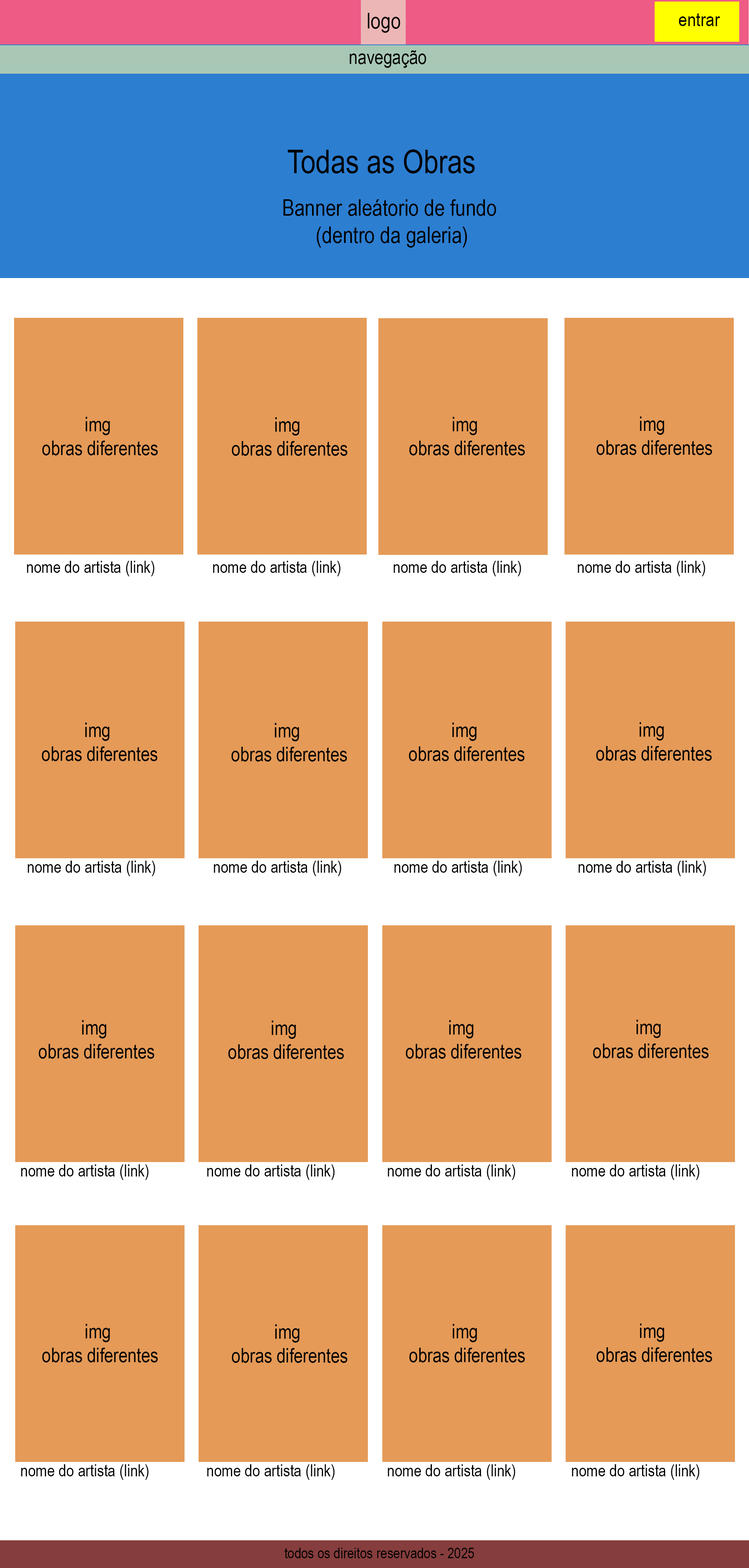
<style>
.page{position:relative;width:749px;height:1568px;background:#e59a57}
.page>*{position:absolute;margin:0}
.t1{font:21.9px "ArialNarrow";color:#000000}
.t2{font:19.3px "ArialNarrow";color:#000000}
.t3{font:19.5px "ArialNarrow";color:#000000}
.t4{font:32.8px "ArialNarrow";color:#000000}
.t5{font:22.7px "ArialNarrow";color:#000000}
.t6{font:19.8px "ArialNarrow";color:#000000}
.t7{font:16.8px "ArialNarrow";color:#000000}
.t8{font:14.8px "ArialNarrow";color:#000000}
</style>
<div class="page">
<p class="t1" style="left:367px;top:13px;width:33px;height:20px">logo</p>
<p class="t2" style="left:679px;top:13px;width:41px;height:13px">entrar</p>
<p class="t3" style="left:349px;top:50px;width:77px;height:18px">navegação</p>
<p class="t4" style="left:287px;top:149px;width:188px;height:25px">Todas as Obras</p>
<p class="t5" style="left:283px;top:199px;width:213px;height:49px;text-align:center">Banner aleátorio de fundo<br> (dentro da galeria)</p>
<p class="t6" style="left:42px;top:417px;width:116px;height:38px;text-align:center">img <br>obras diferentes</p>
<p class="t6" style="left:232px;top:417px;width:115px;height:39px;text-align:center">img <br>obras diferentes</p>
<p class="t6" style="left:409px;top:417px;width:116px;height:38px;text-align:center">img <br>obras diferentes</p>
<p class="t6" style="left:596px;top:416px;width:116px;height:39px;text-align:center">img <br>obras diferentes</p>
<p class="t7" style="left:27px;top:561px;width:127px;height:15px">nome do artista (link)</p>
<p class="t7" style="left:213px;top:561px;width:127px;height:15px">nome do artista (link)</p>
<p class="t7" style="left:393px;top:561px;width:128px;height:15px">nome do artista (link)</p>
<p class="t7" style="left:578px;top:561px;width:127px;height:15px">nome do artista (link)</p>
<p class="t6" style="left:42px;top:723px;width:116px;height:38px;text-align:center">img <br>obras diferentes</p>
<p class="t6" style="left:231px;top:723px;width:116px;height:39px;text-align:center">img <br>obras diferentes</p>
<p class="t6" style="left:409px;top:723px;width:115px;height:38px;text-align:center">img <br>obras diferentes</p>
<p class="t6" style="left:596px;top:722px;width:116px;height:39px;text-align:center">img <br>obras diferentes</p>
<p class="t7" style="left:28px;top:861px;width:127px;height:15px">nome do artista (link)</p>
<p class="t7" style="left:214px;top:861px;width:127px;height:15px">nome do artista (link)</p>
<p class="t7" style="left:394px;top:861px;width:128px;height:15px">nome do artista (link)</p>
<p class="t7" style="left:578px;top:861px;width:128px;height:15px">nome do artista (link)</p>
<p class="t6" style="left:39px;top:1020px;width:115px;height:39px;text-align:center">img <br>obras diferentes</p>
<p class="t6" style="left:228px;top:1021px;width:116px;height:38px;text-align:center">img <br>obras diferentes</p>
<p class="t6" style="left:406px;top:1020px;width:115px;height:39px;text-align:center">img <br>obras diferentes</p>
<p class="t6" style="left:593px;top:1020px;width:116px;height:38px;text-align:center">img <br>obras diferentes</p>
<p class="t7" style="left:21px;top:1164px;width:128px;height:16px">nome do artista (link)</p>
<p class="t7" style="left:207px;top:1164px;width:128px;height:16px">nome do artista (link)</p>
<p class="t7" style="left:388px;top:1164px;width:127px;height:16px">nome do artista (link)</p>
<p class="t7" style="left:572px;top:1164px;width:127px;height:16px">nome do artista (link)</p>
<p class="t6" style="left:42px;top:1324px;width:116px;height:38px;text-align:center">img <br>obras diferentes</p>
<p class="t6" style="left:232px;top:1324px;width:115px;height:39px;text-align:center">img <br>obras diferentes</p>
<p class="t6" style="left:409px;top:1324px;width:116px;height:38px;text-align:center">img <br>obras diferentes</p>
<p class="t6" style="left:596px;top:1323px;width:116px;height:39px;text-align:center">img <br>obras diferentes</p>
<p class="t7" style="left:21px;top:1464px;width:128px;height:16px">nome do artista (link)</p>
<p class="t7" style="left:207px;top:1464px;width:128px;height:16px">nome do artista (link)</p>
<p class="t7" style="left:388px;top:1464px;width:127px;height:16px">nome do artista (link)</p>
<p class="t7" style="left:572px;top:1464px;width:127px;height:16px">nome do artista (link)</p>
<p class="t8" style="left:284px;top:1548px;width:190px;height:10px">todos os direitos reservados - 2025</p>
</div>
